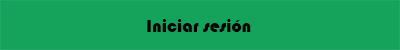
<style>
.page{position:relative;width:400px;height:50px;background:#15a35b}
.page>*{position:absolute;margin:0}
.t1{font:18px "Bauhaus93";color:#000000}
</style>
<div class="page">
<p class="t1" style="left:147px;top:19px;width:104px;height:13px">Iniciar sesión</p>
</div>
